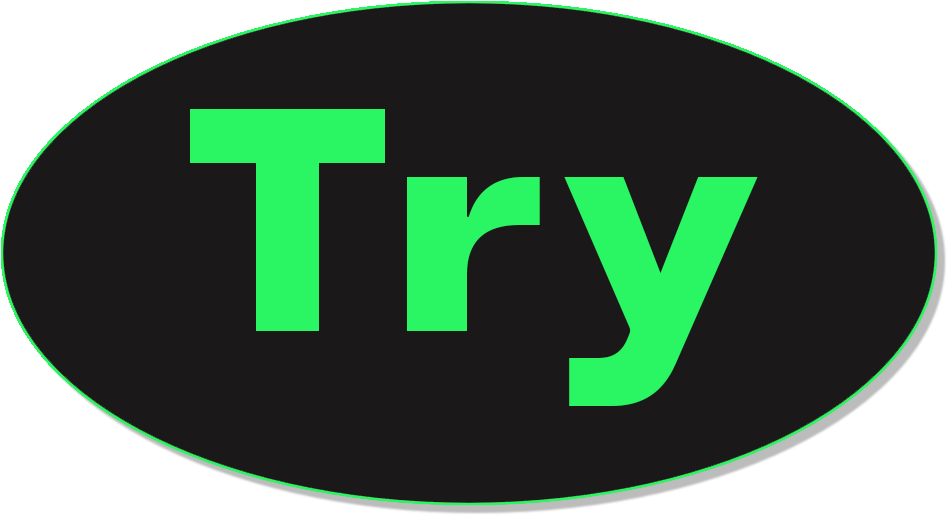
<style>
.page{position:relative;width:948px;height:516px;background:#1a1818}
.page>*{position:absolute;margin:0}
.t1{font:300px "FONTSPRINGDEMO-TGHaidoGroteskBlackRegular";letter-spacing:0.05em;color:#2af563}
</style>
<div class="page">
<p class="t1" style="left:190px;top:109px;width:568px;height:297px">Try</p>
</div>
